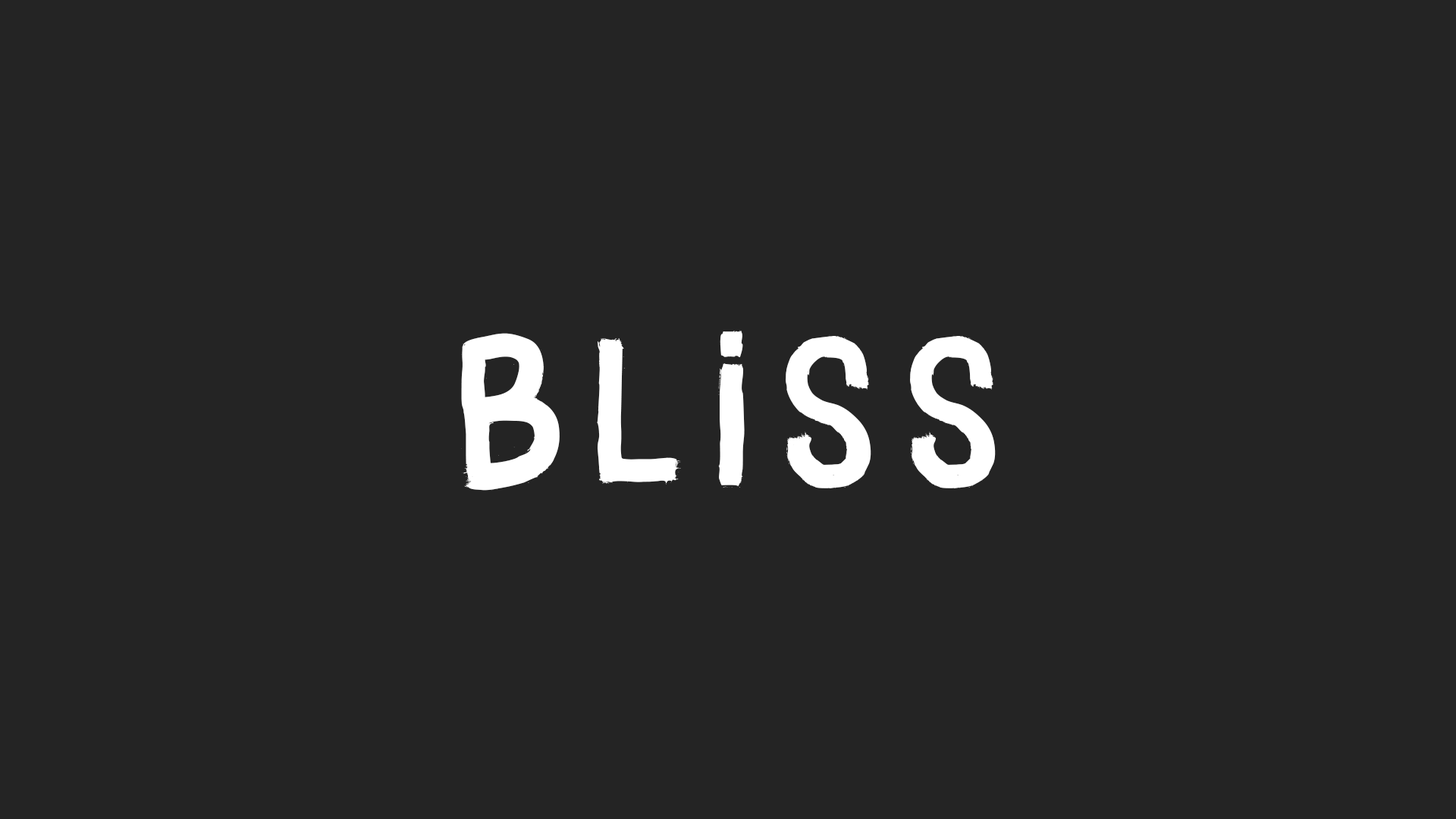
<style>
.page{position:relative;width:1456px;height:819px;background:#242424}
.page>*{position:absolute;margin:0}
.t1{font:189.6px "Dker-Poster";letter-spacing:0.1em;color:#ffffff;text-transform:uppercase}
</style>
<div class="page">
<p class="t1" style="left:461px;top:330px;width:535px;height:161px">bliss</p>
</div>
